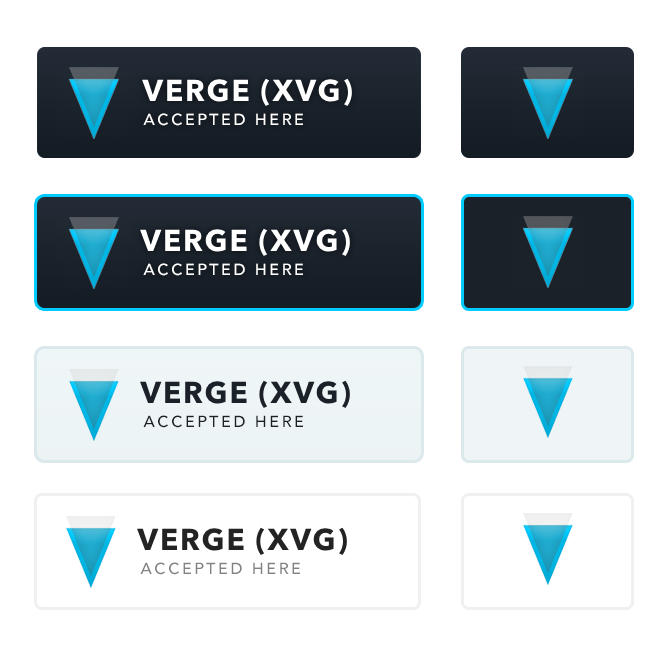
<style>
.page{position:relative;width:672px;height:645px;background:#ffffff}
.page>*{position:absolute;margin:0}
.t1{font:30px "AvenirNext-Bold";letter-spacing:0.06em;color:#ffffff;text-transform:uppercase}
.t2{font:16px "Avenir-Medium";letter-spacing:0.16em;color:#ffffff}
.t3{font:30px "AvenirNext-Bold";letter-spacing:0.06em;color:#1b2128;text-transform:uppercase}
.t4{font:16px "Avenir-Medium";letter-spacing:0.16em;color:#1b2127}
.t5{font:30px "AvenirNext-Bold";letter-spacing:0.06em;color:#232323;text-transform:uppercase}
.t6{font:16px "Avenir-Medium";letter-spacing:0.16em;color:#828282}
</style>
<div class="page">
<p class="t1" style="left:142px;top:78px;width:210px;height:28px">VERGE (XVG)</p>
<p class="t2" style="left:143px;top:113px;width:160px;height:13px">ACCEPTED HERE</p>
<p class="t1" style="left:140px;top:228px;width:210px;height:28px">VERGE (XVG)</p>
<p class="t2" style="left:143px;top:263px;width:160px;height:13px">ACCEPTED HERE</p>
<p class="t3" style="left:140px;top:380px;width:210px;height:28px">VERGE (XVG)</p>
<p class="t4" style="left:143px;top:415px;width:160px;height:13px">ACCEPTED HERE</p>
<p class="t5" style="left:137px;top:527px;width:210px;height:28px">VERGE (XVG)</p>
<p class="t6" style="left:140px;top:562px;width:160px;height:13px">ACCEPTED HERE</p>
</div>
